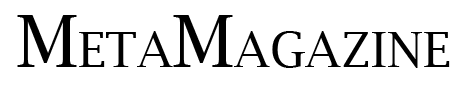
<style>
.page{position:relative;width:466px;height:90px;background:#ffffff}
.page>*{position:absolute;margin:0}
.t1{font:48px "LucidaBright";color:#000000}
.t2{font:72px "LucidaBright";color:#000000}
</style>
<div class="page">
<p class="t1" style="left:17px;top:15px;width:433px;height:53px"><span class="t2">M</span>ETA<span class="t2">M</span>AGAZINE</p>
</div>
